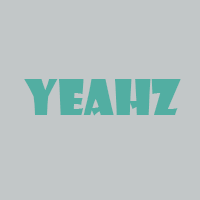
<style>
.page{position:relative;width:200px;height:200px;background:#c2c7c8}
.page>*{position:absolute;margin:0}
.t1{font:48px "ShowcardGothic-Reg";color:#52aea2}
</style>
<div class="page">
<p class="t1" style="left:24px;top:79px;width:157px;height:37px">yeahz</p>
</div>
